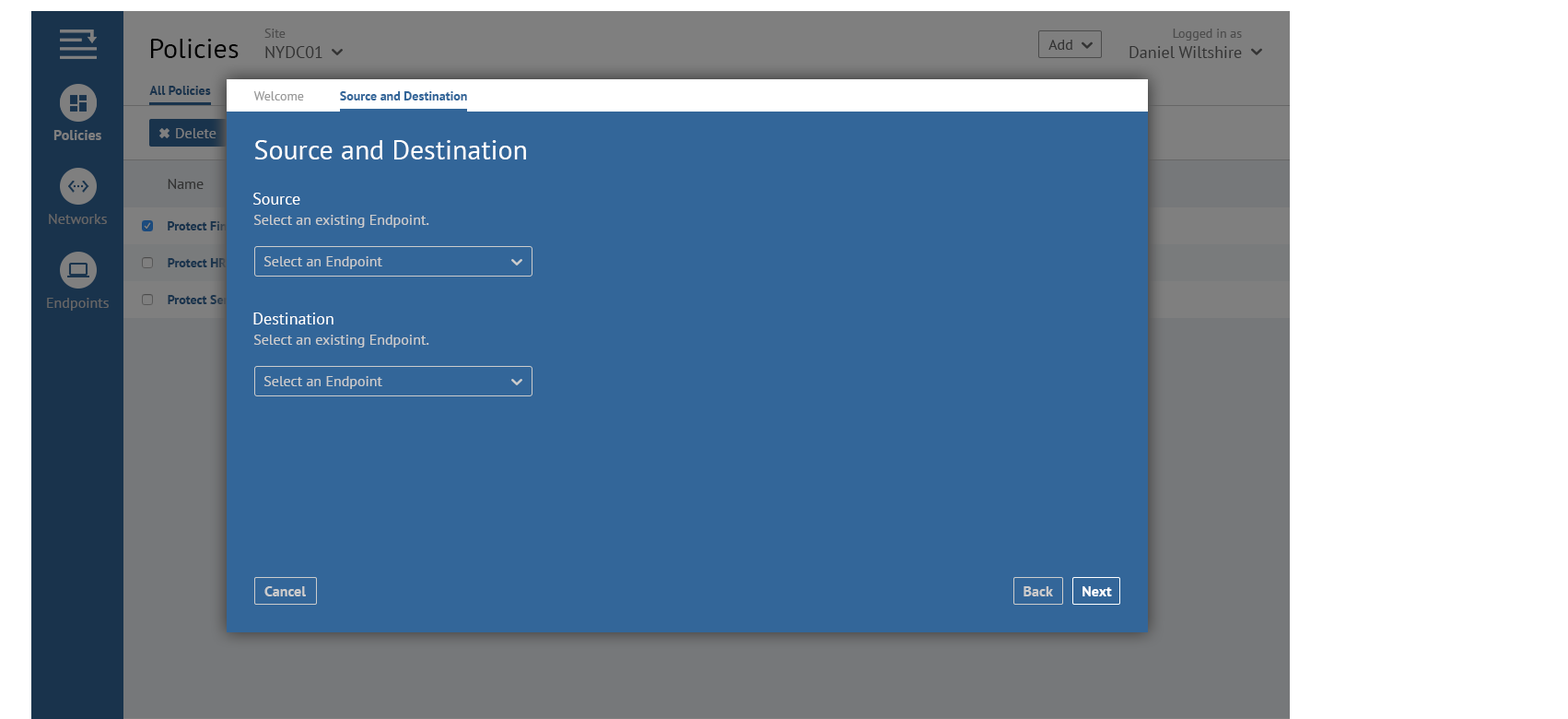
<style>
.page{position:relative;width:1568px;height:719px;background:#336699}
.page>*{position:absolute;margin:0}
.t1{font:16.6px "PTSans-Regular"}
.t2{font:12.9px "PTSans-Regular"}
.t3{font:16.8px "PTSans-Regular"}
.t4{font:13.1px "PTSans-Regular"}
.t5{font:27.6px "PTSans-Regular";color:#000000}
.t6{font:14.7px "PTSans-Regular";color:#333333}
.t7{font:12.8px "PTSans-Bold";color:#19334c}
.t8{font:12.8px "PTSans-Regular";color:#999999}
.t9{font:12.8px "PTSans-Bold";color:#336699}
.t10{font:14.7px "PTSans-Bold";color:#7f7f7f}
.t11{font:14.7px "PTSans-Regular";color:#7f7f7f}
.t12{font:27.6px "PTSans-Regular";color:#ffffff}
.t13{font:16.6px "PTSans-Regular";color:#ffffff}
.t14{font:14.7px "PTSans-Regular";color:#666666}
.t15{font:12.9px "PTSans-Bold"}
.t16{font:14.7px "PTSans-Regular";color:#cccccc}
.t17{font:12.9px "PTSans-Bold";color:#19334c}
.t18{font:14.7px "PTSans-Bold";color:#cccccc}
.t19{font:14.7px "PTSans-Bold";color:#ffffff}
</style>
<div class="page">
<p class="t1" style="left:264px;top:29px;width:58px;height:29px"><span class="t2">Site<br></span>NYDC01</p>
<p class="t3" style="left:1129px;top:29px;width:113px;height:29px;text-align:right"><span class="t4">Logged in as<br></span>Daniel Wiltshire</p>
<p class="t5" style="left:151px;top:39px;width:88px;height:19px">Policies</p>
<p class="t6" style="left:1048px;top:40px;width:24px;height:10px">Add</p>
<p class="t7" style="left:149px;top:86px;width:62px;height:9px">All Policies</p>
<p class="t8" style="left:253px;top:91px;width:51px;height:9px">Welcome</p>
<p class="t9" style="left:340px;top:91px;width:127px;height:9px">Source and Destination</p>
<p class="t10" style="left:53px;top:130px;width:48px;height:10px">Policies</p>
<p class="t11" style="left:176px;top:128px;width:40px;height:10px">Delete</p>
<p class="t12" style="left:254px;top:140px;width:272px;height:19px">Source and Destination</p>
<p class="t6" style="left:168px;top:179px;width:36px;height:10px">Name</p>
<p class="t13" style="left:253px;top:193px;width:47px;height:12px">Source</p>
<p class="t14" style="left:49px;top:214px;width:58px;height:10px">Networks</p>
<p class="t15" style="left:168px;top:221px;width:84px;height:9px">Protect Finance</p>
<p class="t16" style="left:253px;top:215px;width:176px;height:13px">Select an existing Endpoint.</p>
<p class="t17" style="left:168px;top:258px;width:59px;height:9px">Protect HR</p>
<p class="t16" style="left:263px;top:256px;width:119px;height:13px">Select an Endpoint</p>
<p class="t14" style="left:47px;top:298px;width:62px;height:12px">Endpoints</p>
<p class="t15" style="left:168px;top:295px;width:83px;height:9px">Protect Servers</p>
<p class="t13" style="left:253px;top:312px;width:80px;height:12px">Destination</p>
<p class="t16" style="left:253px;top:334px;width:176px;height:13px">Select an existing Endpoint.</p>
<p class="t16" style="left:263px;top:376px;width:119px;height:13px">Select an Endpoint</p>
<p class="t18" style="left:264px;top:586px;width:42px;height:10px">Cancel</p>
<p class="t18" style="left:1024px;top:586px;width:29px;height:10px">Back</p>
<p class="t19" style="left:1082px;top:586px;width:30px;height:10px">Next</p>
</div>
